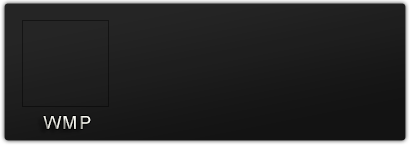
<style>
.page{position:relative;width:410px;height:145px}
.page>*{position:absolute;margin:0}
.t1{font:18px "ArialMT";letter-spacing:0.1em}
</style>
<div class="page">
<p class="t1" style="left:43px;top:116px;width:48px;height:13px">WMP</p>
</div>
